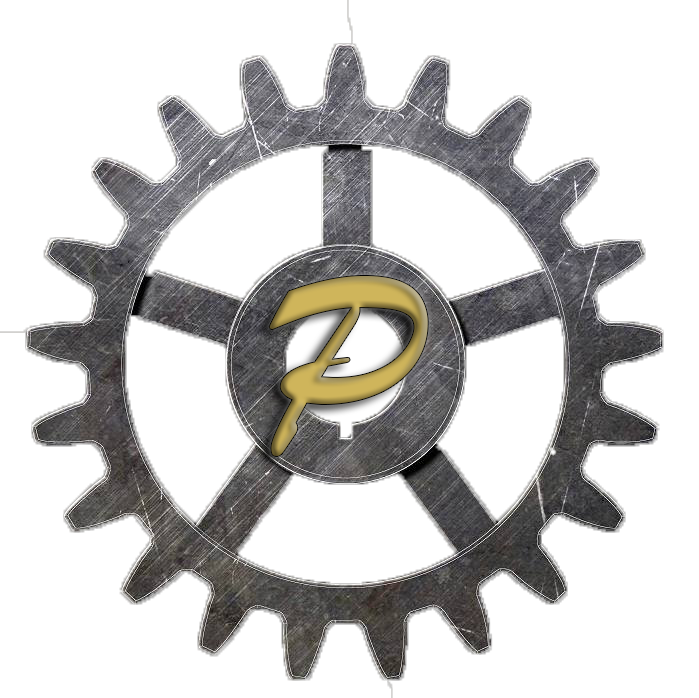
<style>
.page{position:relative;width:699px;height:698px;background:#ffffff}
.page>*{position:absolute;margin:0}
.t1{font:250px "BrushScriptMT"}
</style>
<div class="page">
<p class="t1" style="left:269px;top:276px;width:159px;height:180px">P</p>
</div>
